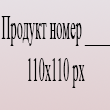
<style>
.page{position:relative;width:110px;height:110px}
.page>*{position:absolute;margin:0}
.t1{font:34.4px "TimesNewRomanPSMT";color:#000000;scale:0.36 1}
</style>
<div class="page">
<p class="t1" style="left:1px;top:16px;width:109px;height:72px;text-align:center">Продукт номер ____<br>110х110 px</p>
</div>
